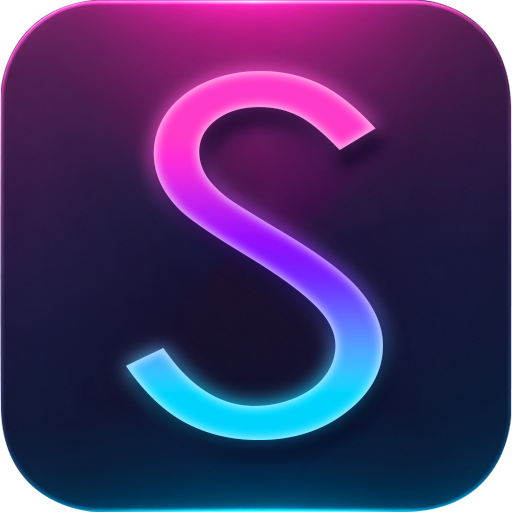
<style>
.page{position:relative;width:512px;height:512px}
.page>*{position:absolute;margin:0}
.t1{font:488px "CenturyGothic";scale:1.25 1}
</style>
<div class="page">
<p class="t1" style="left:126px;top:71px;width:257px;height:369px">S</p>
</div>
